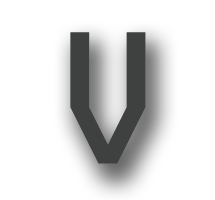
<style>
.page{position:relative;width:215px;height:200px;background:#ffffff}
.page>*{position:absolute;margin:0}
.t1{font:150px "Manteka";color:#3f4040}
</style>
<div class="page">
<p class="t1" style="left:70px;top:32px;width:76px;height:132px">V</p>
</div>
